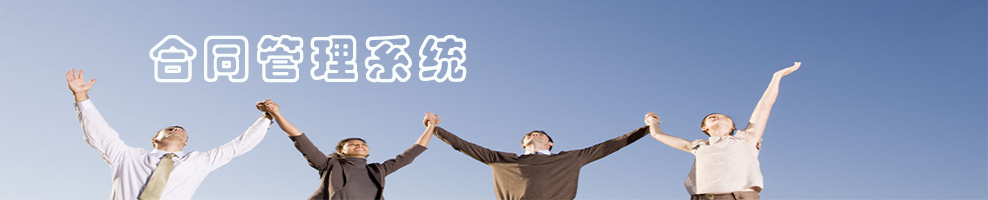
<style>
.page{position:relative;width:988px;height:200px}
.page>*{position:absolute;margin:0}
.t1{font:48px "STCaiyun";letter-spacing:0.1em;color:#f8fcfa;font-weight:bold}
</style>
<div class="page">
<p class="t1" style="left:149px;top:34px;width:318px;height:49px">合同管理系统</p>
</div>
